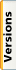
<style>
.page{position:relative;width:16px;height:70px}
.page>*{position:absolute;margin:0}
.t1{font:11px "FreewayBlack";letter-spacing:0.027em;color:#000000}
</style>
<div class="page">
<p class="t1" style="left:3px;top:11px;width:9px;height:52px;rotate:-90deg">Versions</p>
</div>
